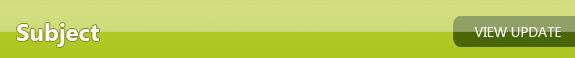
<style>
.page{position:relative;width:575px;height:58px}
.page>*{position:absolute;margin:0}
.t1{font:24px "SegoeUI-Bold";color:#fefefe}
.t2{font:14px "SegoeUI";color:#f6f7f1}
</style>
<div class="page">
<p class="t1" style="left:17px;top:23px;width:82px;height:24px">Subject</p>
<p class="t2" style="left:474px;top:27px;width:88px;height:10px">VIEW UPDATE</p>
</div>
